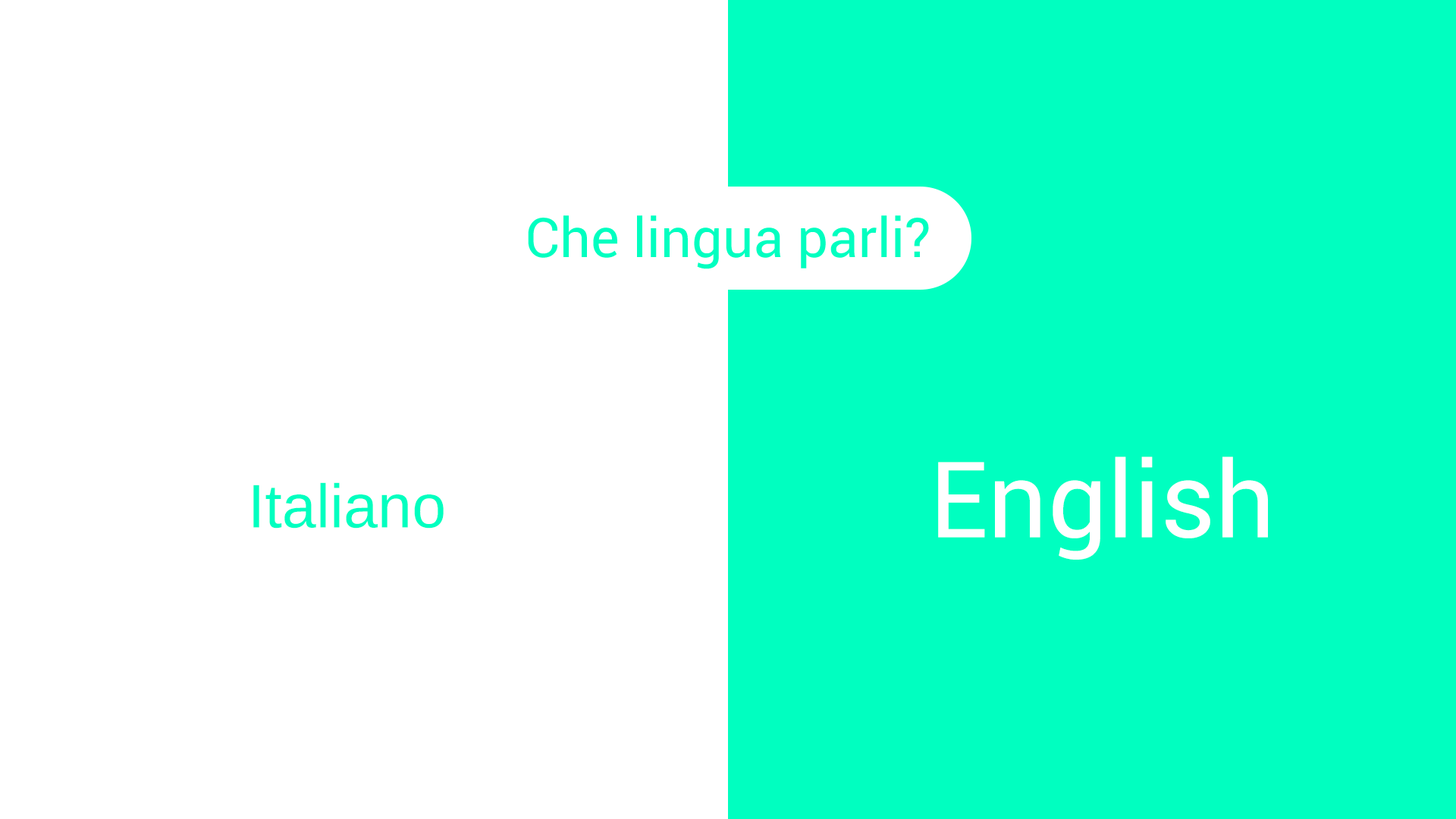
<style>
.page{position:relative;width:1456px;height:819px;background:#ffffff}
.page>*{position:absolute;margin:0}
.t1{font:105.2px "Roboto-Regular";color:#ffffff}
.t2{font:61.5px "LiberationSans";color:#00ffc0}
</style>
<div class="page">
<p class="t1" style="left:938px;top:457px;width:330px;height:103px">English</p>
<p class="t2" style="left:253px;top:482px;width:191px;height:47px">Italiano</p>
</div>
